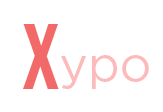
<style>
.page{position:relative;width:163px;height:112px;background:#ffffff}
.page>*{position:absolute;margin:0}
.t1{font:93.3px "BebasNeue-Regular";letter-spacing:0.005em;color:#f26969}
.t2{font:48px "Gotham-Book";letter-spacing:0.005em;color:#fcbaba}
</style>
<div class="page">
<p class="t1" style="left:23px;top:24px;width:36px;height:65px">X</p>
<p class="t2" style="left:61px;top:55px;width:88px;height:34px">ypo</p>
</div>
